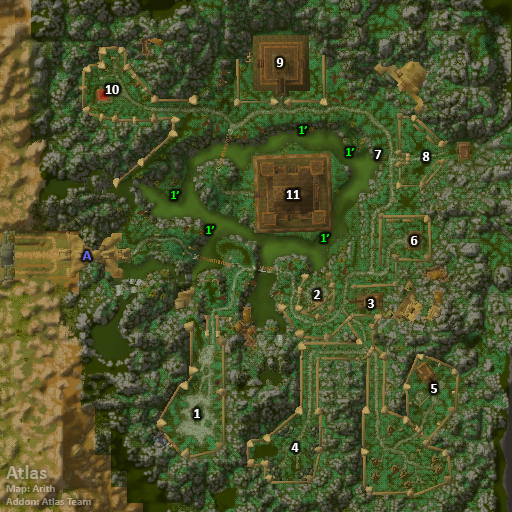
<style>
.page{position:relative;width:512px;height:512px}
.page>*{position:absolute;margin:0}
.t1{font:14px "Calibri-Bold";color:#ffffff}
.t2{font:12px "Calibri-Bold";color:#00ff00}
.t3{font:14px "Calibri-Bold";color:#6666ff}
.t4{font:11px "Calibri-Bold";color:#afa686}
.t5{font:20px "Calibri-Bold";color:#afa686}
</style>
<div class="page">
<p class="t1" style="left:276px;top:58px;width:8px;height:9px">9</p>
<p class="t1" style="left:105px;top:85px;width:14px;height:9px">10</p>
<p class="t2" style="left:299px;top:126px;width:8px;height:8px">1’</p>
<p class="t2" style="left:346px;top:148px;width:8px;height:8px">1’</p>
<p class="t1" style="left:374px;top:150px;width:8px;height:9px">7</p>
<p class="t1" style="left:422px;top:152px;width:8px;height:9px">8</p>
<p class="t2" style="left:171px;top:191px;width:8px;height:8px">1’</p>
<p class="t1" style="left:286px;top:190px;width:14px;height:9px">11</p>
<p class="t2" style="left:206px;top:226px;width:8px;height:8px">1’</p>
<p class="t2" style="left:321px;top:234px;width:8px;height:8px">1’</p>
<p class="t1" style="left:411px;top:236px;width:7px;height:9px">6</p>
<p class="t3" style="left:82px;top:251px;width:9px;height:9px">A</p>
<p class="t1" style="left:314px;top:290px;width:7px;height:9px">2</p>
<p class="t1" style="left:368px;top:299px;width:6px;height:9px">3</p>
<p class="t1" style="left:431px;top:384px;width:6px;height:9px">5</p>
<p class="t1" style="left:194px;top:409px;width:6px;height:9px">1</p>
<p class="t1" style="left:291px;top:443px;width:8px;height:9px">4</p>
<p class="t4" style="left:6px;top:465px;width:85px;height:40px"><span class="t5">Atlas<br></span>Map: Arith<br>Addon: Atlas Team</p>
</div>
